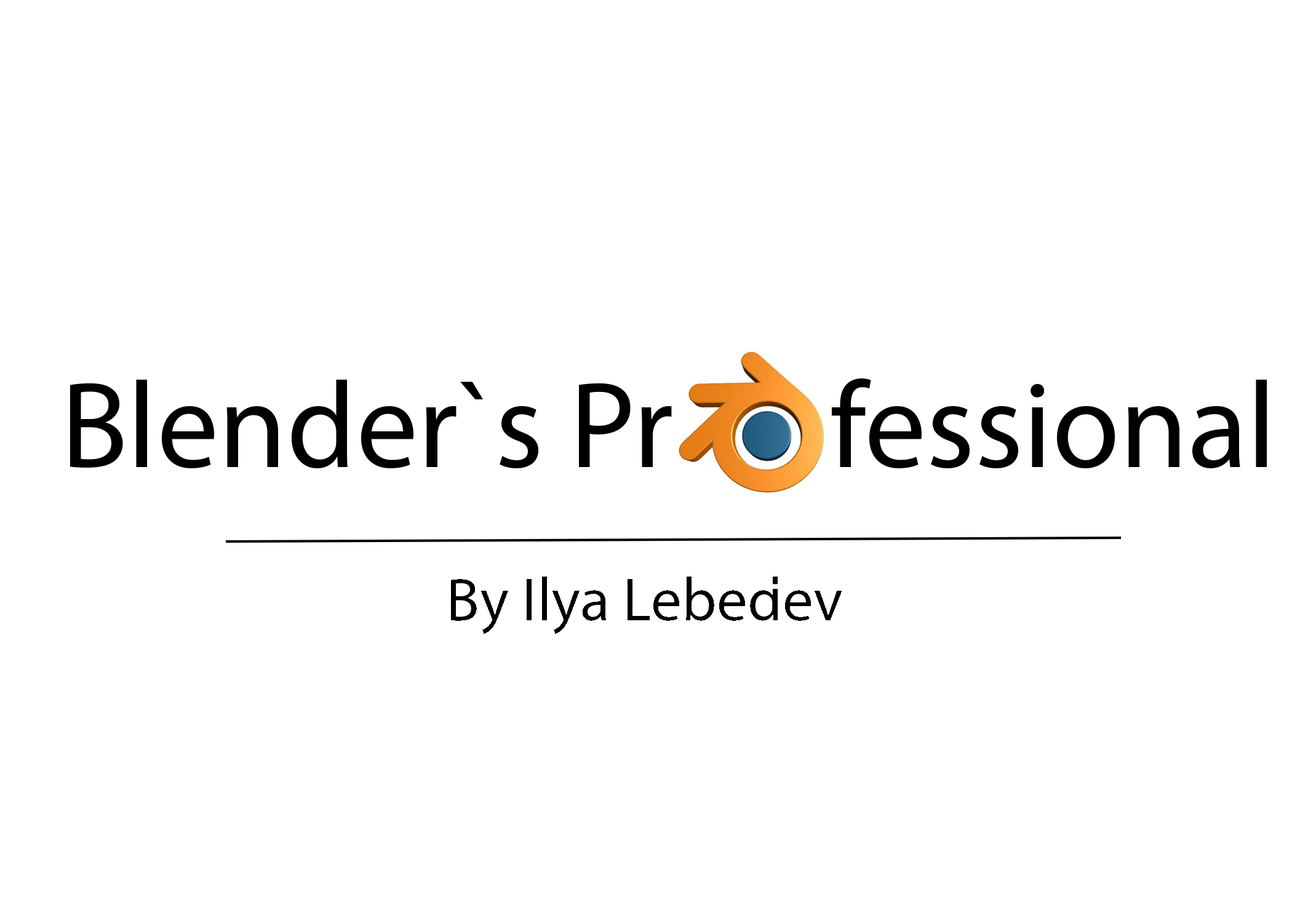
<style>
.page{position:relative;width:1292px;height:923px;background:#ffffff}
.page>*{position:absolute;margin:0}
.t1{font:123.1px "MyriadPro-Regular";color:#000000}
</style>
<div class="page">
<p class="t1" style="left:70px;top:378px;width:1197px;height:90px">Blender`s Pr      fessional</p>
</div>
